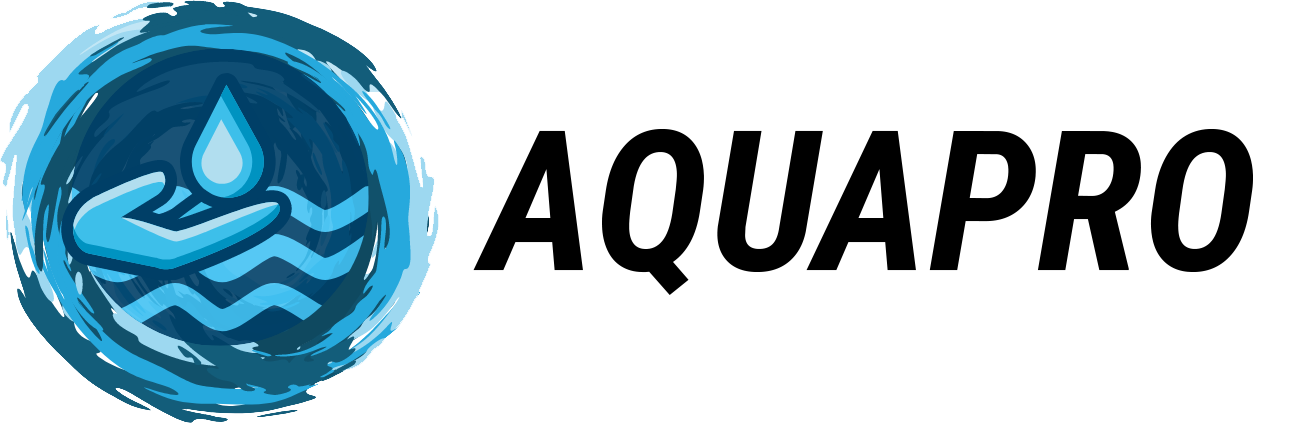
<style>
.page{position:relative;width:1297px;height:423px;background:#ffffff}
.page>*{position:absolute;margin:0}
.t1{font:194.7px "RobotoCondensed-BoldItalic";color:#000000}
</style>
<div class="page">
<p class="t1" style="left:473px;top:128px;width:780px;height:167px">AQUAPRO</p>
</div>
